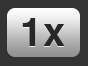
<style>
.page{position:relative;width:88px;height:66px;background:#333333}
.page>*{position:absolute;margin:0}
.t1{font:40px "Helvetica-Bold";color:#282828}
</style>
<div class="page">
<p class="t1" style="left:22px;top:18px;width:43px;height:28px">1x</p>
</div>
